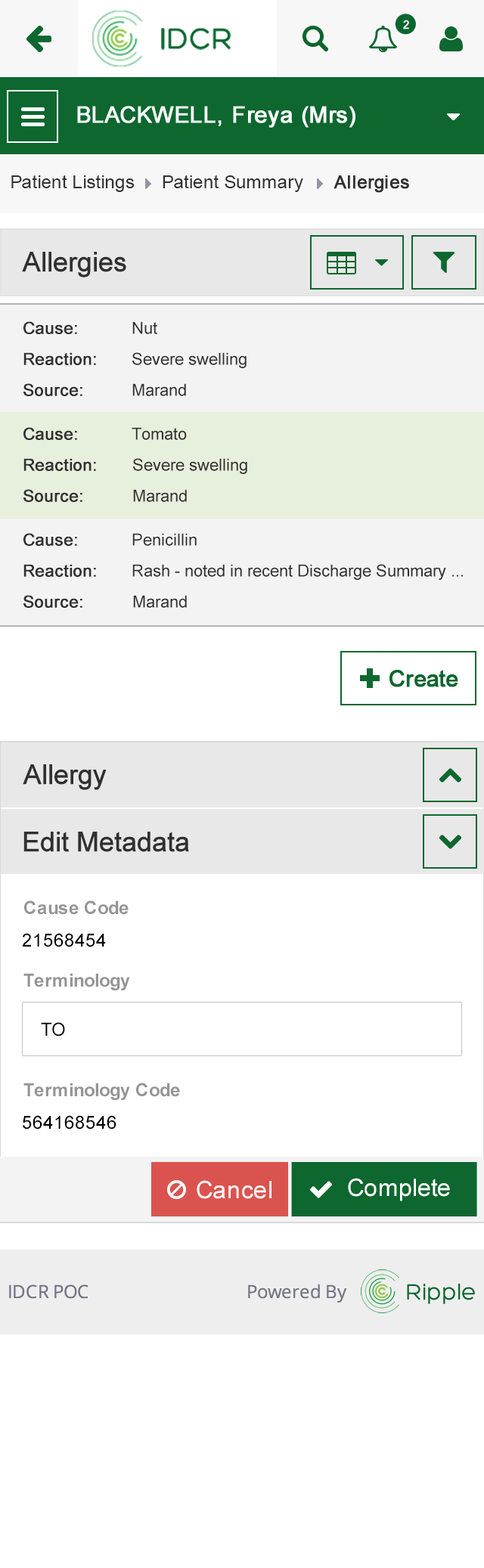
<style>
.page{position:relative;width:484px;height:1568px;background:#ffffff}
.page>*{position:absolute;margin:0}
.t1{font:18.1px "ArialMT";color:#313131}
.t2{font:18.1px "ArialMT";color:#313131;font-weight:bold}
.t3{font:27.2px "ArialMT";color:#303030;font-weight:bold}
.t4{font:16.6px "ArialMT";color:#303030;font-weight:bold}
.t5{font:16.6px "ArialMT";color:#303030}
.t6{font:18.1px "Arial-BoldMT";color:#959595}
.t7{font:18.1px "ArialMT";color:#000000}
.t8{font:24.2px "ArialMT";color:#ffffff}
</style>
<div class="page">
<p class="t1" style="left:11px;top:175px;width:124px;height:17px">Patient Listings</p>
<p class="t1" style="left:163px;top:175px;width:140px;height:17px">Patient Summary</p>
<p class="t2" style="left:333px;top:175px;width:76px;height:18px">Allergies</p>
<p class="t3" style="left:22px;top:252px;width:104px;height:25px">Allergies</p>
<p class="t4" style="left:23px;top:321px;width:54px;height:13px">Cause:</p>
<p class="t5" style="left:132px;top:321px;width:25px;height:13px">Nut</p>
<p class="t4" style="left:23px;top:352px;width:73px;height:13px">Reaction:</p>
<p class="t5" style="left:132px;top:352px;width:114px;height:16px">Severe swelling</p>
<p class="t4" style="left:23px;top:383px;width:59px;height:13px">Source:</p>
<p class="t5" style="left:132px;top:383px;width:54px;height:13px">Marand</p>
<p class="t4" style="left:23px;top:427px;width:54px;height:13px">Cause:</p>
<p class="t5" style="left:132px;top:427px;width:55px;height:13px">Tomato</p>
<p class="t4" style="left:23px;top:458px;width:73px;height:13px">Reaction:</p>
<p class="t5" style="left:133px;top:458px;width:114px;height:16px">Severe swelling</p>
<p class="t4" style="left:23px;top:489px;width:59px;height:13px">Source:</p>
<p class="t5" style="left:133px;top:489px;width:54px;height:13px">Marand</p>
<p class="t4" style="left:23px;top:533px;width:54px;height:13px">Cause:</p>
<p class="t5" style="left:132px;top:533px;width:65px;height:13px">Penicillin</p>
<p class="t4" style="left:23px;top:564px;width:73px;height:13px">Reaction:</p>
<p class="t5" style="left:132px;top:564px;width:331px;height:16px">Rash - noted in recent Discharge Summary ...</p>
<p class="t4" style="left:23px;top:595px;width:59px;height:13px">Source:</p>
<p class="t5" style="left:133px;top:595px;width:54px;height:13px">Marand</p>
<p class="t3" style="left:23px;top:764px;width:84px;height:26px">Allergy</p>
<p class="t3" style="left:23px;top:832px;width:166px;height:20px">Edit Metadata</p>
<p class="t6" style="left:24px;top:900px;width:105px;height:15px">Cause Code</p>
<p class="t7" style="left:22px;top:933px;width:84px;height:14px">21568454</p>
<p class="t6" style="left:23px;top:973px;width:107px;height:17px">Terminology</p>
<p class="t7" style="left:41px;top:1022px;width:24px;height:15px">TO</p>
<p class="t6" style="left:23px;top:1083px;width:157px;height:17px">Terminology Code</p>
<p class="t7" style="left:23px;top:1115px;width:93px;height:15px">564168546</p>
<p class="t8" style="left:197px;top:1180px;width:74px;height:19px">Cancel</p>
<p class="t8" style="left:348px;top:1178px;width:102px;height:23px">Complete</p>
</div>
